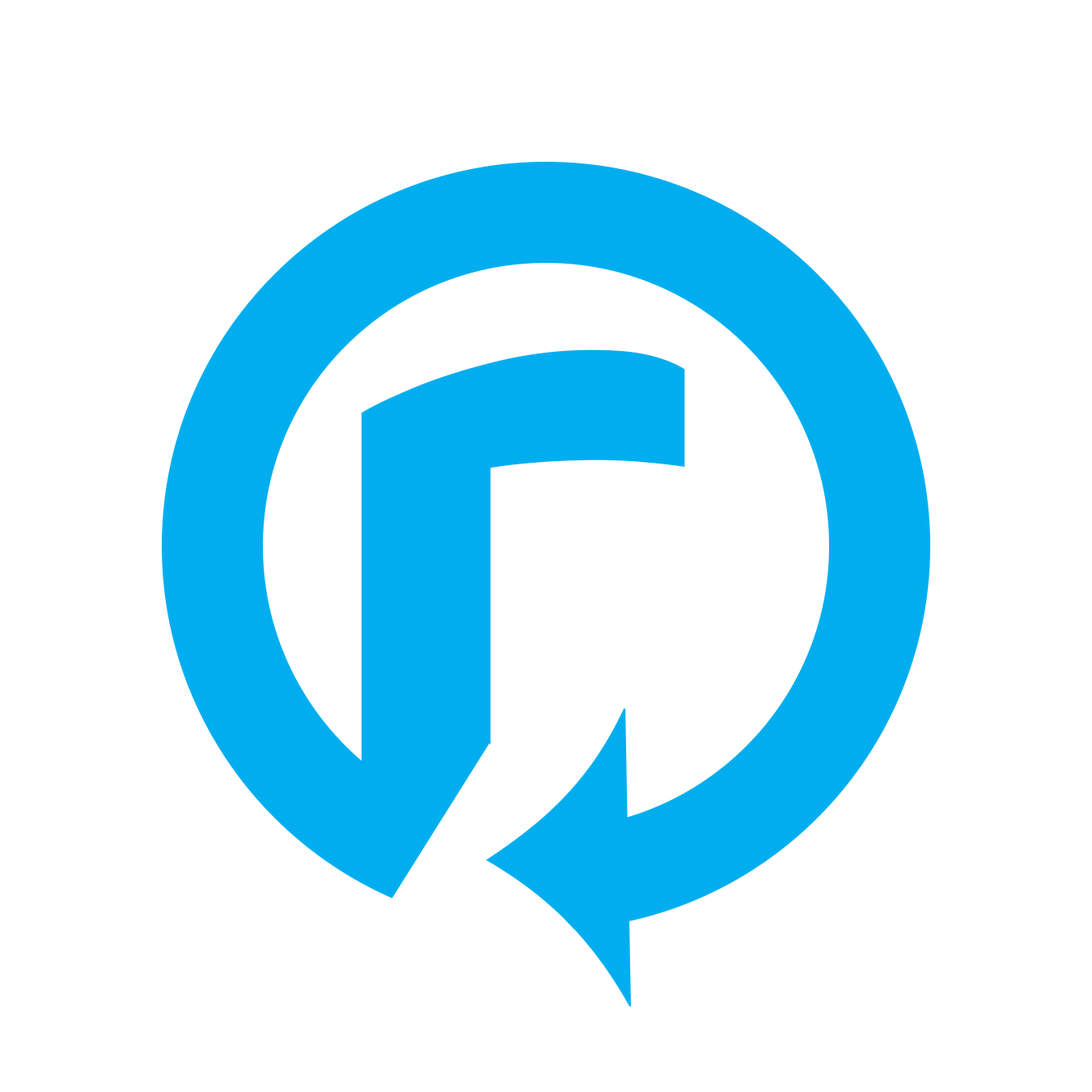
<style>
.page{position:relative;width:1092px;height:1092px;background:#ffffff}
.page>*{position:absolute;margin:0}
.t1{font:1016px "MavenPro-SemiBold";color:#00aeef}
</style>
<div class="page">
<p class="t1" style="left:361px;top:349px;width:324px;height:526px">r</p>
</div>
